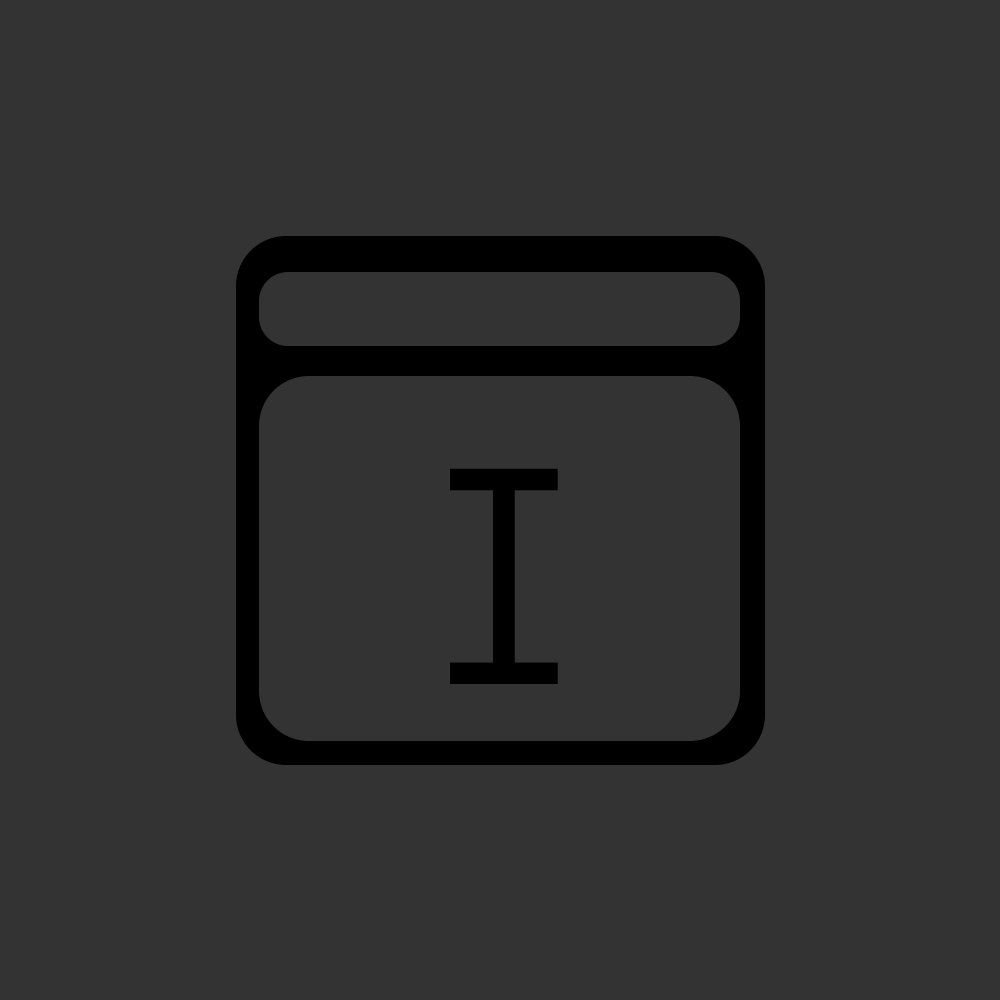
<style>
.page{position:relative;width:1000px;height:1000px;background:#333333}
.page>*{position:absolute;margin:0}
.t1{font:344.4px "Courier";letter-spacing:-0.025em;color:#000000}
</style>
<div class="page">
<p class="t1" style="left:450px;top:468px;width:108px;height:216px">I</p>
</div>
